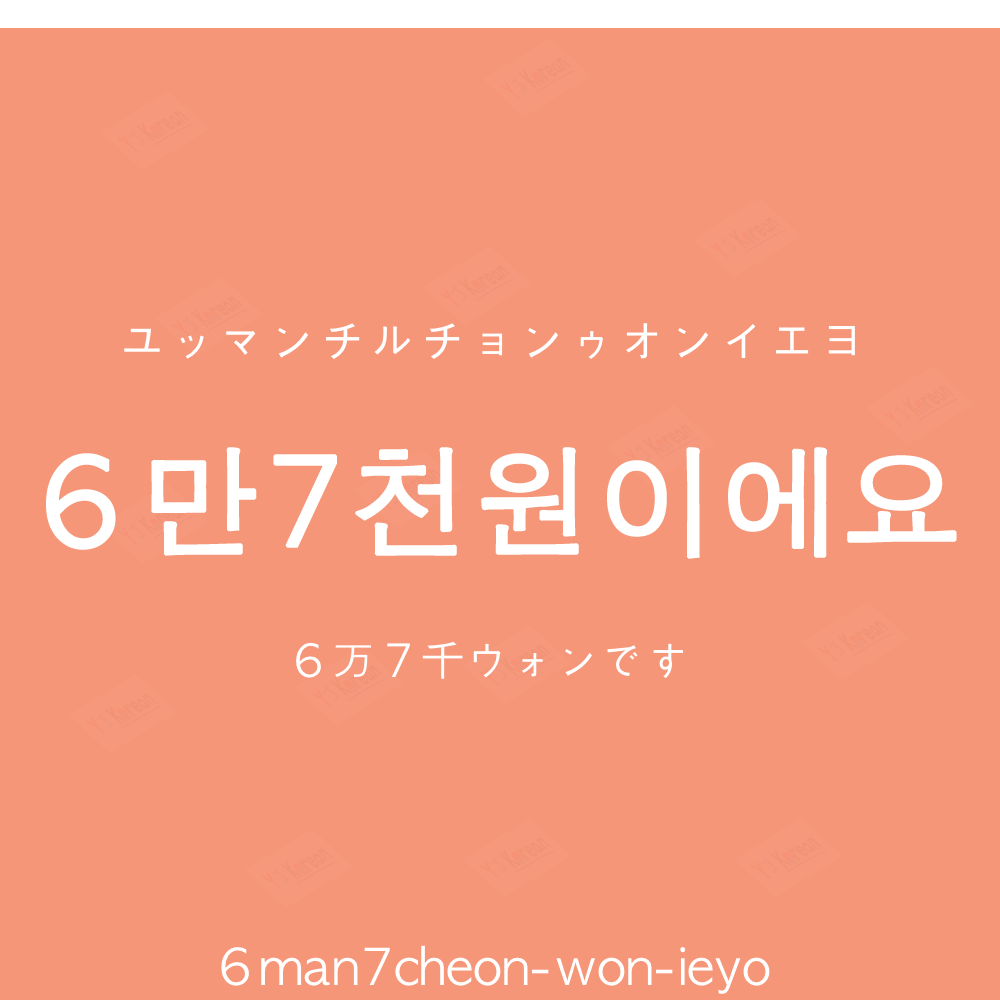
<style>
.page{position:relative;width:1000px;height:1000px;background:#f69679}
.page>*{position:absolute;margin:0}
.t1{font:50px "AppleGothic";color:#ffffff}
.t2{font:120px "AppleGothic";color:#ffffff;font-weight:bold}
.t3{font:45px "AppleGothic";color:#ffffff}
</style>
<div class="page">
<p class="t1" style="left:124px;top:323px;width:731px;height:36px">ユッマンチルチョンゥオンイエヨ</p>
<p class="t2" style="left:46px;top:447px;width:911px;height:112px">６만7천원이에요</p>
<p class="t3" style="left:296px;top:641px;width:387px;height:38px">６万７千ウォンです</p>
<p class="t1" style="left:221px;top:945px;width:549px;height:49px">６man7cheon-won-ieyo</p>
</div>
